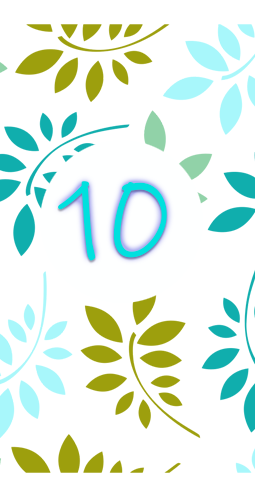
<style>
.page{position:relative;width:255px;height:482px;background:#ffffff}
.page>*{position:absolute;margin:0}
.t1{font:112.6px "InkFree";color:#00e0de}
</style>
<div class="page">
<p class="t1" style="left:58px;top:181px;width:109px;height:80px">10</p>
</div>
